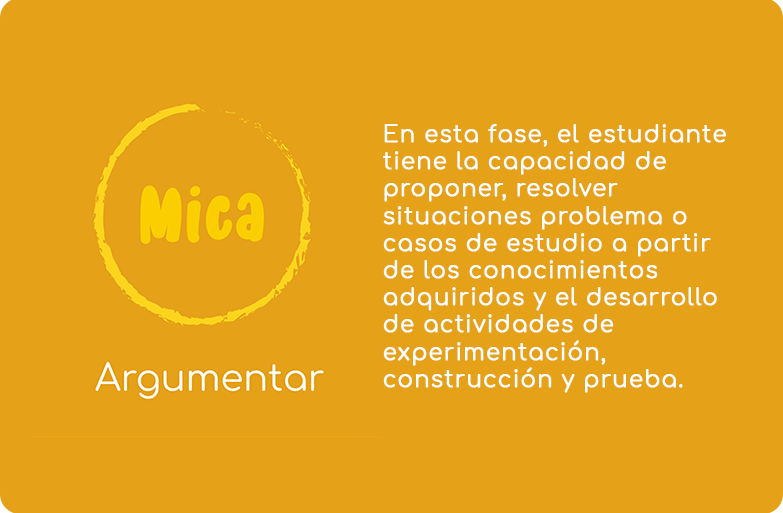
<style>
.page{position:relative;width:783px;height:513px;background:#e5a117}
.page>*{position:absolute;margin:0}
.t1{font:22.7px "Comfortaa-Regular";letter-spacing:0.03em;color:#ffffff;font-weight:bold}
</style>
<div class="page">
<p class="t1" style="left:383px;top:124px;width:343px;height:269px">En esta fase, el estudiante tiene la capacidad de proponer, resolver situaciones problema o casos de estudio a partir de los conocimientos adquiridos y el desarrollo de actividades de experimentación, construcción y prueba.</p>
</div>
